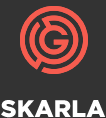
<style>
.page{position:relative;width:106px;height:118px;background:#333333}
.page>*{position:absolute;margin:0}
.t1{font:24px "GothamBlack";letter-spacing:0.01em;color:#ffffff;text-transform:uppercase}
</style>
<div class="page">
<p class="t1" style="left:1px;top:100px;width:105px;height:18px">skarla</p>
</div>
